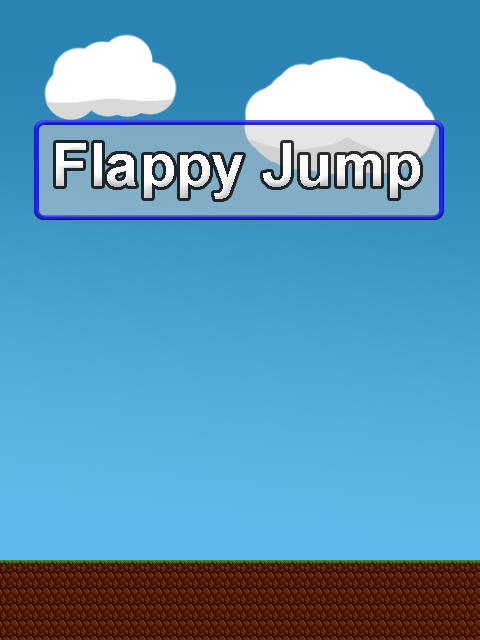
<style>
.page{position:relative;width:480px;height:640px}
.page>*{position:absolute;margin:0}
.t1{font:60px "Arial-BoldMT";color:#ffffff}
</style>
<div class="page">
<p class="t1" style="left:56px;top:143px;width:364px;height:56px">Flappy Jump</p>
</div>
